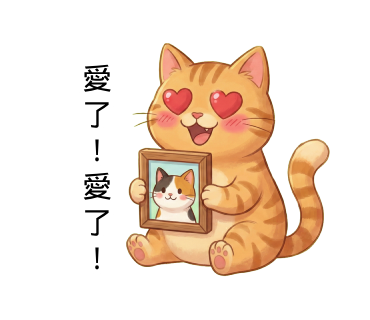
<style>
.page{position:relative;width:370px;height:320px;background:#ffffff}
.page>*{position:absolute;margin:0}
.t1{font:30px "DroidSansFallback";color:#000000}
</style>
<div class="page">
<p class="t1" style="left:83px;top:64px;width:28px;height:206px">愛<br>了<br>！<br>愛<br>了<br>！</p>
</div>
